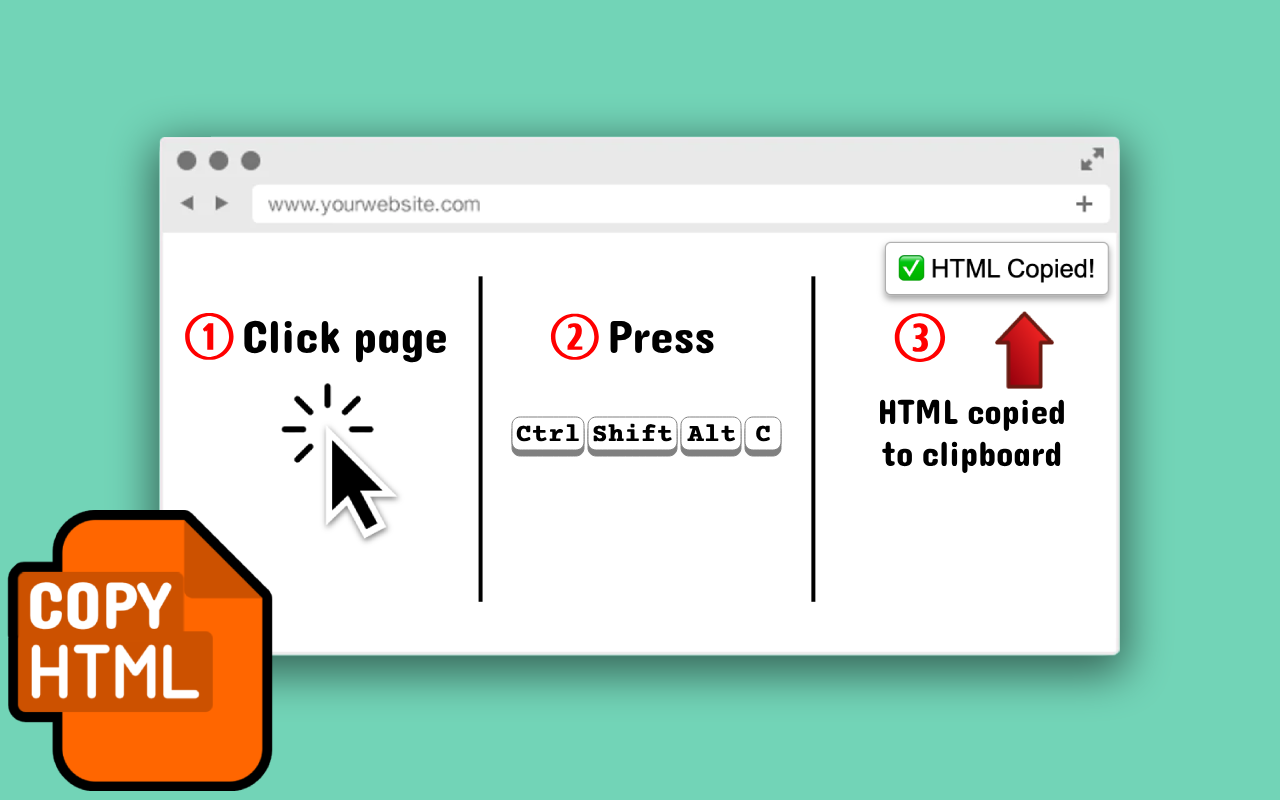
<style>
.page{position:relative;width:1280px;height:800px;background:#ffffff}
.page>*{position:absolute;margin:0}
.t1{font:62.4px "CombiNumeralsLtd";color:#ff0000;font-weight:bold}
.t2{font:61.6px "CombiNumeralsLtd";color:#ff0000;font-weight:bold}
.t3{font:64.8px "CombiNumeralsLtd";color:#ff0000;font-weight:bold}
.t4{font:46.9px "Dangrek-Regular";color:#000000}
.t5{font:35.3px "Dangrek-Regular";color:#000000}
.t6{font:26px "CourierPrime-Bold";color:#000000;font-weight:bold}
</style>
<div class="page">
<p class="t1" style="left:185px;top:313px;width:49px;height:47px">1</p>
<p class="t2" style="left:550px;top:313px;width:49px;height:47px">2</p>
<p class="t3" style="left:894px;top:313px;width:52px;height:49px">3</p>
<p class="t4" style="left:244px;top:320px;width:202px;height:43px">Click page</p>
<p class="t4" style="left:610px;top:321px;width:104px;height:33px">Press</p>
<p class="t5" style="left:880px;top:399px;width:184px;height:74px;text-align:center">HTML copied<br>to clipboard</p>
<p class="t6" style="left:516px;top:424px;width:63px;height:18px">Ctrl</p>
<p class="t6" style="left:593px;top:423px;width:79px;height:19px">Shift</p>
<p class="t6" style="left:687px;top:424px;width:48px;height:18px">Alt</p>
<p class="t6" style="left:756px;top:425px;width:14px;height:17px">C</p>
</div>
